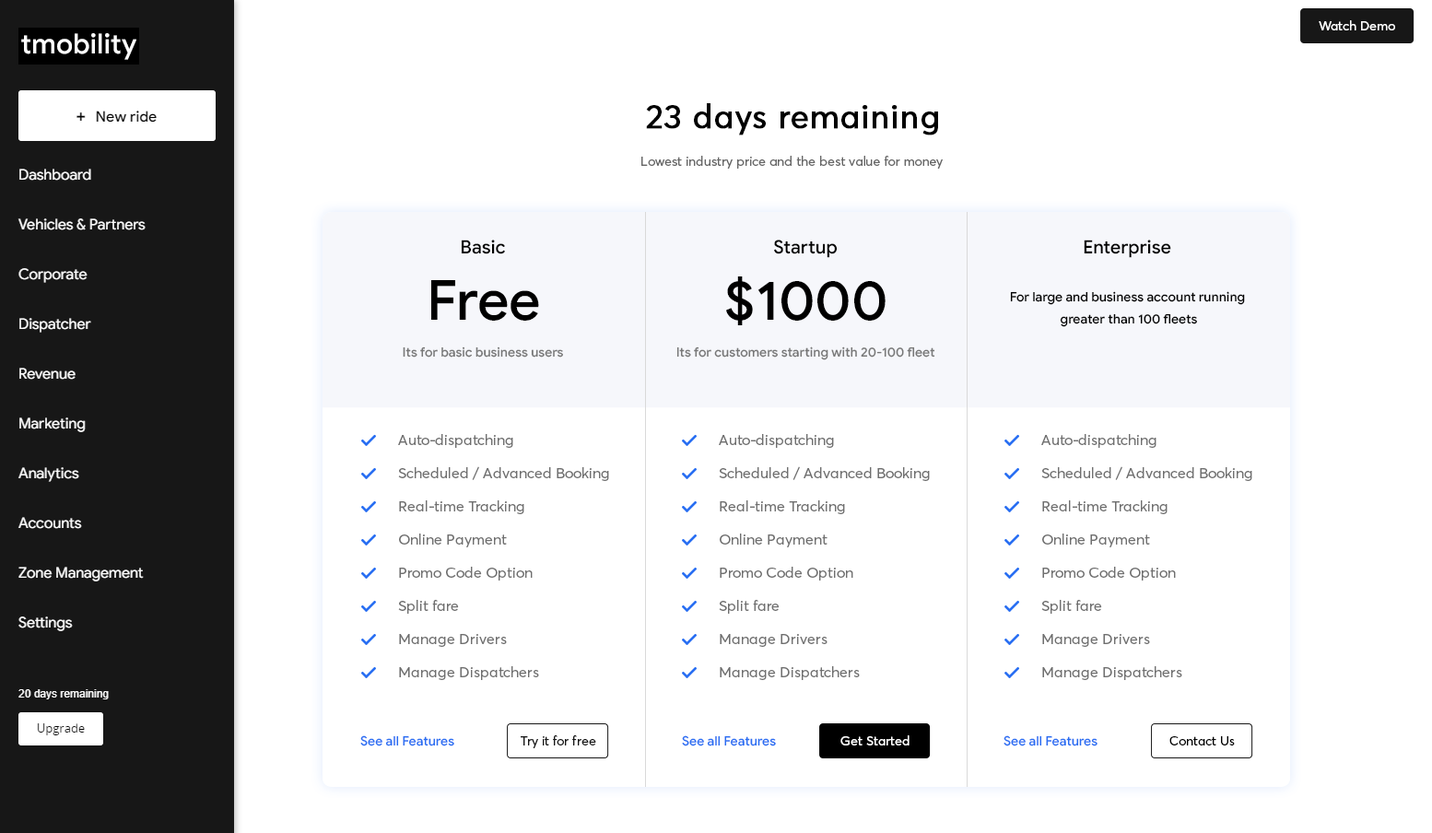
<style>
.page{position:relative;width:1432px;height:833px;background:#ffffff}
.page>*{position:absolute;margin:0}
.t1{font:12.9px "AvertaDemoPECuttedDemo-Regular";color:#fefefe}
.t2{font:33.2px "AvertaDemoPECuttedDemo-Regular";color:#000000;font-weight:bold}
.t3{font:13px "AvertaDemoPECuttedDemo-Regular";color:#666666}
.t4{font:18.4px "GoogleSans-Medium";color:#000000}
.t5{font:55.3px "GoogleSans-Medium";color:#000000}
.t6{font:12.9px/22.1px "GoogleSans-Medium";color:#000000}
.t7{font:12.9px "GoogleSans-Medium";color:#777777}
.t8{font:14.7px/33.2px "AvertaDemoPECuttedDemo-Regular";color:#6f6f6f}
.t9{font:12.9px "GoogleSans-Medium";color:#286ef2}
.t10{font:12.9px "AvertaDemoPECuttedDemo-Regular";color:#171717}
.t11{font:12.9px "AvertaDemoPECuttedDemo-Regular";color:#ffffff}
.t12{font:12.9px "AvertaDemoPECuttedDemo-Regular";color:#000000}
</style>
<div class="page">
<p class="t1" style="left:1318px;top:20px;width:77px;height:10px">Watch Demo</p>
<p class="t2" style="left:646px;top:103px;width:292px;height:32px">23 days remaining</p>
<p class="t3" style="left:641px;top:156px;width:302px;height:13px">Lowest industry price and the best value for money</p>
<p class="t4" style="left:462px;top:240px;width:43px;height:14px">Basic</p>
<p class="t4" style="left:774px;top:240px;width:63px;height:18px">Startup</p>
<p class="t4" style="left:1083px;top:240px;width:88px;height:18px">Enterprise</p>
<p class="t5" style="left:431px;top:280px;width:108px;height:41px">Free</p>
<p class="t5" style="left:726px;top:276px;width:159px;height:49px">$1000</p>
<p class="t6" style="left:1010px;top:291px;width:235px;height:36px;text-align:center">For large and business account running <br>greater than 100 fleets</p>
<p class="t7" style="left:403px;top:346px;width:160px;height:11px">Its for basic business users</p>
<p class="t7" style="left:676px;top:346px;width:259px;height:14px">Its for customers starting with 20-100 fleet</p>
<p class="t8" style="left:398px;top:434px;width:211px;height:246px">Auto-dispatching<br>Scheduled / Advanced Booking<br>Real-time Tracking<br>Online Payment<br>Promo Code Option<br>Split fare<br>Manage Drivers<br>Manage Dispatchers</p>
<p class="t8" style="left:719px;top:434px;width:211px;height:246px">Auto-dispatching<br>Scheduled / Advanced Booking<br>Real-time Tracking<br>Online Payment<br>Promo Code Option<br>Split fare<br>Manage Drivers<br>Manage Dispatchers</p>
<p class="t8" style="left:1041px;top:434px;width:211px;height:246px">Auto-dispatching<br>Scheduled / Advanced Booking<br>Real-time Tracking<br>Online Payment<br>Promo Code Option<br>Split fare<br>Manage Drivers<br>Manage Dispatchers</p>
<p class="t9" style="left:360px;top:735px;width:94px;height:11px">See all Features</p>
<p class="t10" style="left:521px;top:735px;width:75px;height:13px">Try it for free</p>
<p class="t9" style="left:682px;top:735px;width:94px;height:11px">See all Features</p>
<p class="t11" style="left:840px;top:735px;width:69px;height:10px">Get Started</p>
<p class="t9" style="left:1003px;top:735px;width:94px;height:11px">See all Features</p>
<p class="t12" style="left:1169px;top:736px;width:66px;height:9px">Contact Us</p>
</div>
